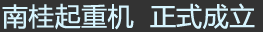
<style>
.page{position:relative;width:263px;height:32px;background:#333333}
.page>*{position:absolute;margin:0}
.t1{font:25.7px "MicrosoftYaHei";color:#d6f5ff;font-weight:bold}
</style>
<div class="page">
<p class="t1" style="left:2px;top:3px;width:132px;height:27px">南桂起重机</p>
<p class="t1" style="left:150px;top:3px;width:105px;height:26px">正式成立</p>
</div>
